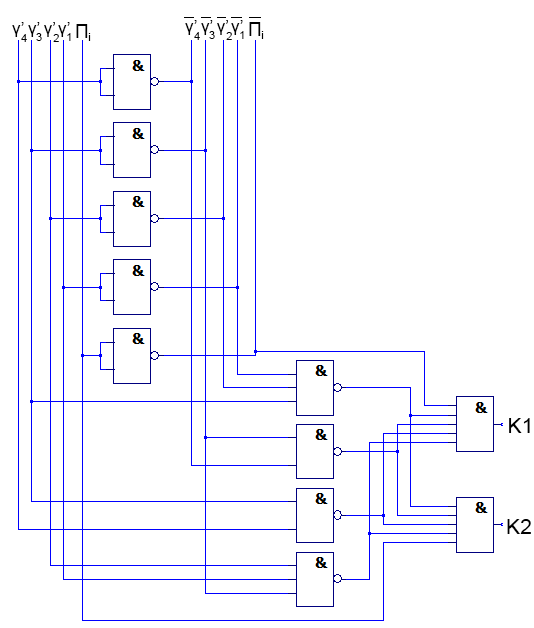
<style>
.page{position:relative;width:534px;height:628px;background:#ffffff}
.page>*{position:absolute;margin:0}
.t1{font:17.2px "ArialMT";color:#000000}
.t2{font:19.1px "ArialMT";color:#000000}
.t3{font:11.5px "ArialMT";color:#000000}
.t4{font:21.3px "ArialMT";color:#000000}
</style>
<div class="page">
<p class="t1" style="left:12px;top:22px;width:12px;height:15px">γ’</p>
<p class="t1" style="left:28px;top:22px;width:12px;height:15px">γ’</p>
<p class="t1" style="left:44px;top:22px;width:11px;height:15px">γ’</p>
<p class="t1" style="left:58px;top:22px;width:12px;height:15px">γ’</p>
<p class="t2" style="left:76px;top:24px;width:12px;height:14px">П</p>
<p class="t1" style="left:185px;top:20px;width:12px;height:15px">γ’</p>
<p class="t1" style="left:201px;top:20px;width:12px;height:15px">γ’</p>
<p class="t1" style="left:217px;top:20px;width:11px;height:15px">γ’</p>
<p class="t1" style="left:231px;top:20px;width:12px;height:15px">γ’</p>
<p class="t2" style="left:249px;top:22px;width:12px;height:14px">П</p>
<p class="t3" style="left:21px;top:34px;width:6px;height:8px">4</p>
<p class="t3" style="left:36px;top:33px;width:6px;height:8px">3</p>
<p class="t3" style="left:53px;top:34px;width:6px;height:8px">2</p>
<p class="t3" style="left:67px;top:33px;width:4px;height:8px">1</p>
<p class="t3" style="left:88px;top:33px;width:3px;height:8px">i</p>
<p class="t3" style="left:194px;top:32px;width:6px;height:8px">4</p>
<p class="t3" style="left:209px;top:31px;width:6px;height:8px">3</p>
<p class="t3" style="left:226px;top:32px;width:6px;height:8px">2</p>
<p class="t3" style="left:240px;top:31px;width:4px;height:8px">1</p>
<p class="t3" style="left:261px;top:31px;width:3px;height:8px">i</p>
<p class="t4" style="left:509px;top:418px;width:21px;height:15px">K1</p>
<p class="t4" style="left:507px;top:519px;width:24px;height:15px">K2</p>
</div>
